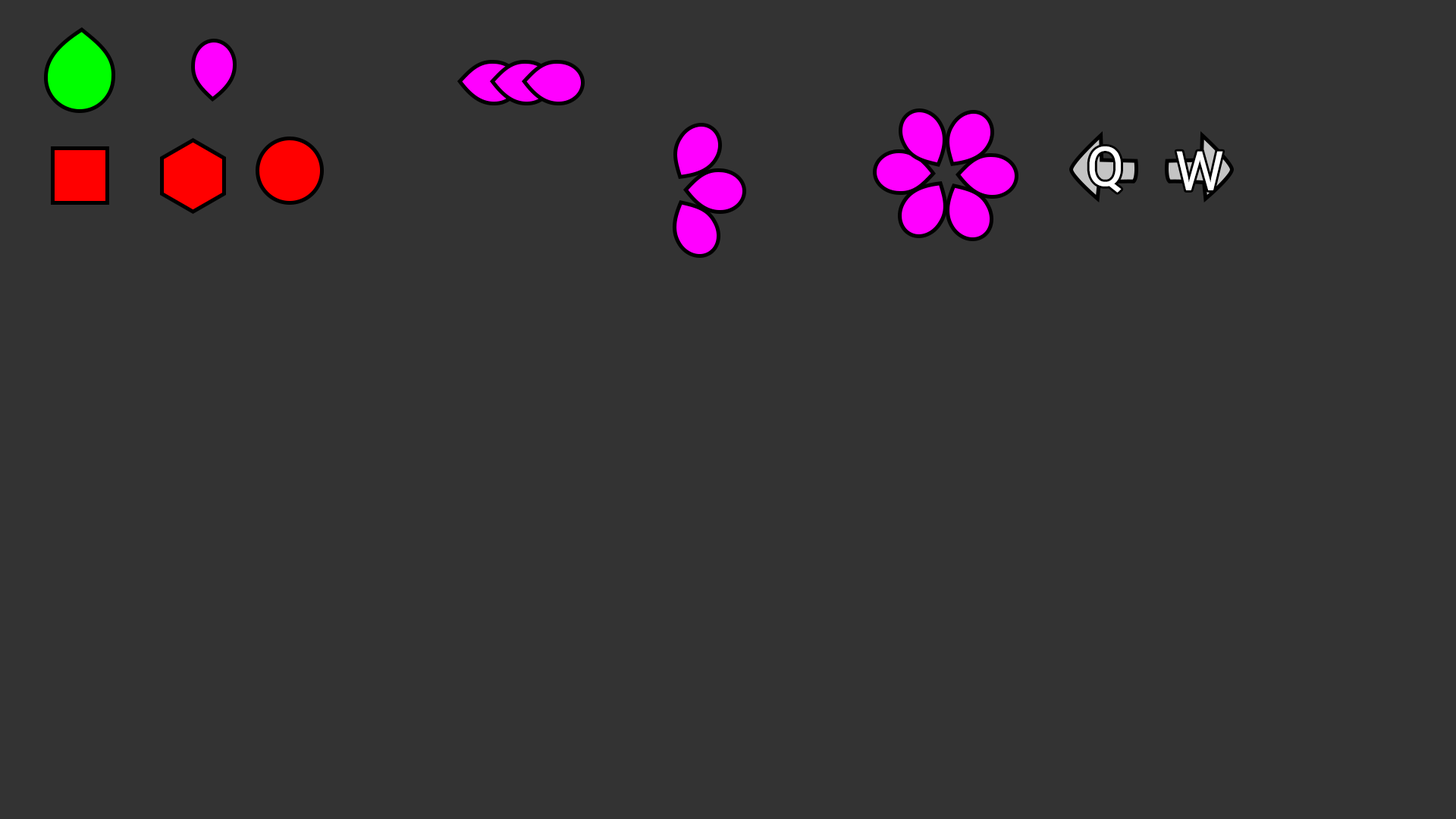
<style>
.page{position:relative;width:1456px;height:819px;background:#333333}
.page>*{position:absolute;margin:0}
.t1{font:54.6px "Roboto-Regular";letter-spacing:0.1em;color:#ffffff}
</style>
<div class="page">
<p class="t1" style="left:1089px;top:146px;width:33px;height:47px">Q</p>
<p class="t1" style="left:1176px;top:151px;width:47px;height:39px">W</p>
</div>
